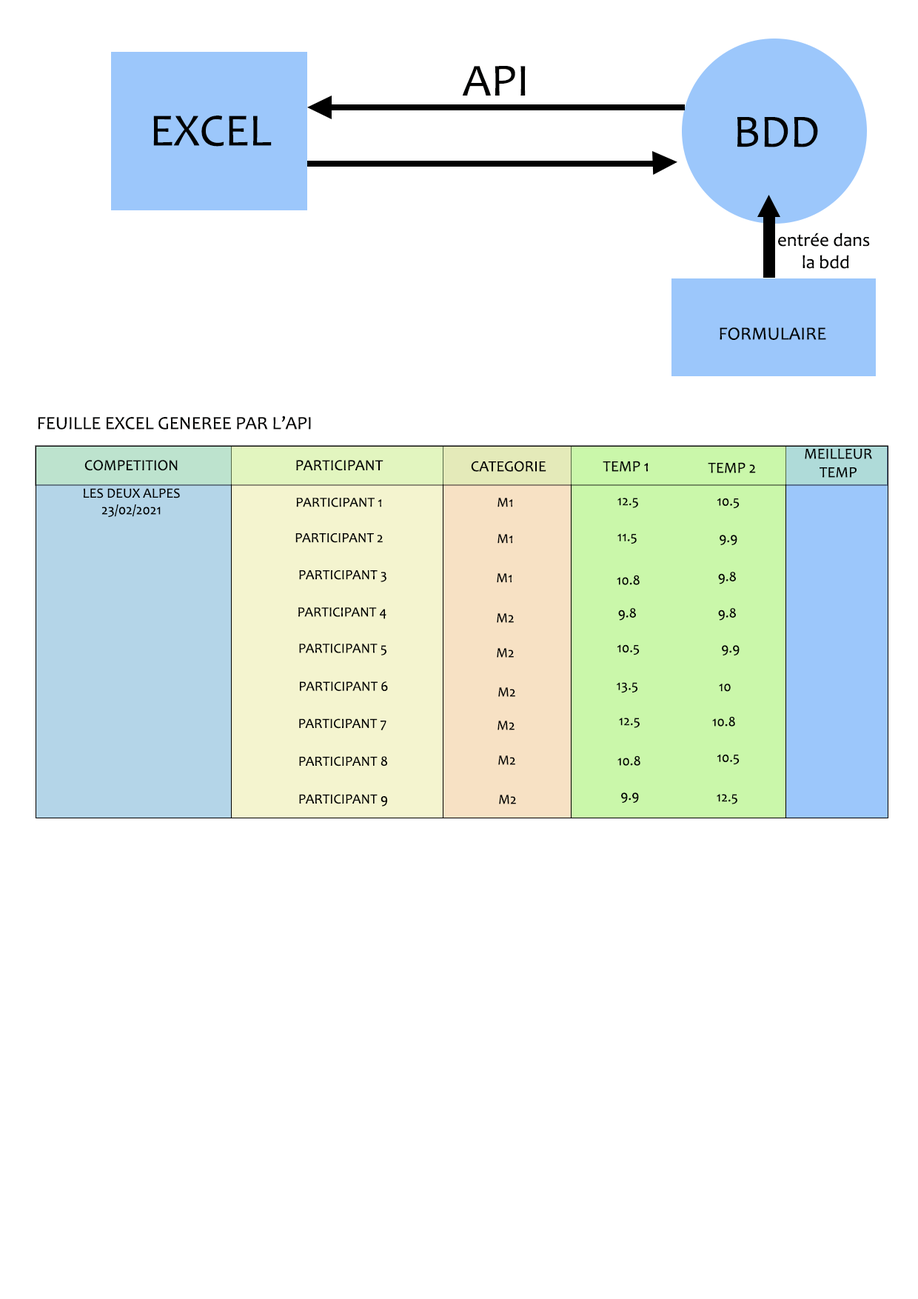
<style>
.page{position:relative;width:918px;height:1299px;background:#ffffff}
.page>*{position:absolute;margin:0}
.t1{font:46.3px "Candara";color:#000101}
.t2{font:18.5px "Candara";color:#000101}
.t3{font:15.4px "Candara";color:#000101}
.t4{font:13.9px "Candara";color:#000101}
</style>
<div class="page">
<p class="t1" style="left:462px;top:66px;width:64px;height:30px">API</p>
<p class="t1" style="left:153px;top:116px;width:119px;height:31px">EXCEL</p>
<p class="t1" style="left:737px;top:117px;width:81px;height:30px">BDD</p>
<p class="t2" style="left:778px;top:232px;width:92px;height:37px;text-align:center">entrée dans <br>la bdd</p>
<p class="t2" style="left:720px;top:327px;width:106px;height:13px">FORMULAIRE</p>
<p class="t2" style="left:38px;top:415px;width:273px;height:14px">FEUILLE EXCEL GENEREE PAR L’API</p>
<p class="t3" style="left:805px;top:449px;width:67px;height:29px;text-align:center">MEILLEUR<br>TEMP</p>
<p class="t3" style="left:84px;top:460px;width:94px;height:11px">COMPETITION</p>
<p class="t3" style="left:296px;top:460px;width:88px;height:11px">PARTICIPANT</p>
<p class="t3" style="left:471px;top:461px;width:75px;height:11px">CATEGORIE</p>
<p class="t3" style="left:603px;top:461px;width:45px;height:11px">TEMP 1</p>
<p class="t3" style="left:708px;top:462px;width:48px;height:11px">TEMP 2</p>
<p class="t4" style="left:84px;top:488px;width:96px;height:29px;text-align:center">LES DEUX ALPES<br>23/02/2021</p>
<p class="t4" style="left:296px;top:498px;width:85px;height:9px">PARTICIPANT 1</p>
<p class="t4" style="left:498px;top:498px;width:14px;height:9px">M1</p>
<p class="t4" style="left:618px;top:498px;width:20px;height:10px">12.5</p>
<p class="t4" style="left:717px;top:498px;width:23px;height:11px">10.5</p>
<p class="t4" style="left:295px;top:533px;width:88px;height:10px">PARTICIPANT 2</p>
<p class="t4" style="left:498px;top:534px;width:14px;height:9px">M1</p>
<p class="t4" style="left:618px;top:533px;width:19px;height:11px">11.5</p>
<p class="t4" style="left:720px;top:535px;width:17px;height:10px">9.9</p>
<p class="t4" style="left:299px;top:570px;width:88px;height:12px">PARTICIPANT 3</p>
<p class="t4" style="left:497px;top:573px;width:15px;height:10px">M1</p>
<p class="t4" style="left:617px;top:575px;width:23px;height:10px">10.8</p>
<p class="t4" style="left:718px;top:572px;width:18px;height:12px">9.8</p>
<p class="t4" style="left:298px;top:607px;width:89px;height:12px">PARTICIPANT 4</p>
<p class="t4" style="left:497px;top:613px;width:17px;height:10px">M2</p>
<p class="t4" style="left:618px;top:608px;width:18px;height:12px">9.8</p>
<p class="t4" style="left:718px;top:608px;width:18px;height:12px">9.8</p>
<p class="t4" style="left:299px;top:643px;width:88px;height:12px">PARTICIPANT 5</p>
<p class="t4" style="left:497px;top:648px;width:17px;height:10px">M2</p>
<p class="t4" style="left:617px;top:644px;width:23px;height:11px">10.5</p>
<p class="t4" style="left:722px;top:645px;width:18px;height:10px">9.9</p>
<p class="t4" style="left:300px;top:681px;width:88px;height:10px">PARTICIPANT 6</p>
<p class="t4" style="left:498px;top:687px;width:17px;height:10px">M2</p>
<p class="t4" style="left:617px;top:682px;width:21px;height:11px">13.5</p>
<p class="t4" style="left:719px;top:683px;width:12px;height:9px">10</p>
<p class="t4" style="left:299px;top:718px;width:88px;height:12px">PARTICIPANT 7</p>
<p class="t4" style="left:498px;top:720px;width:17px;height:10px">M2</p>
<p class="t4" style="left:619px;top:717px;width:21px;height:11px">12.5</p>
<p class="t4" style="left:712px;top:716px;width:23px;height:10px">10.8</p>
<p class="t4" style="left:299px;top:756px;width:88px;height:10px">PARTICIPANT 8</p>
<p class="t4" style="left:498px;top:755px;width:17px;height:10px">M2</p>
<p class="t4" style="left:618px;top:755px;width:22px;height:11px">10.8</p>
<p class="t4" style="left:717px;top:754px;width:23px;height:11px">10.5</p>
<p class="t4" style="left:299px;top:794px;width:88px;height:12px">PARTICIPANT 9</p>
<p class="t4" style="left:499px;top:794px;width:17px;height:10px">M2</p>
<p class="t4" style="left:621px;top:792px;width:18px;height:11px">9.9</p>
<p class="t4" style="left:717px;top:794px;width:20px;height:10px">12.5</p>
</div>
